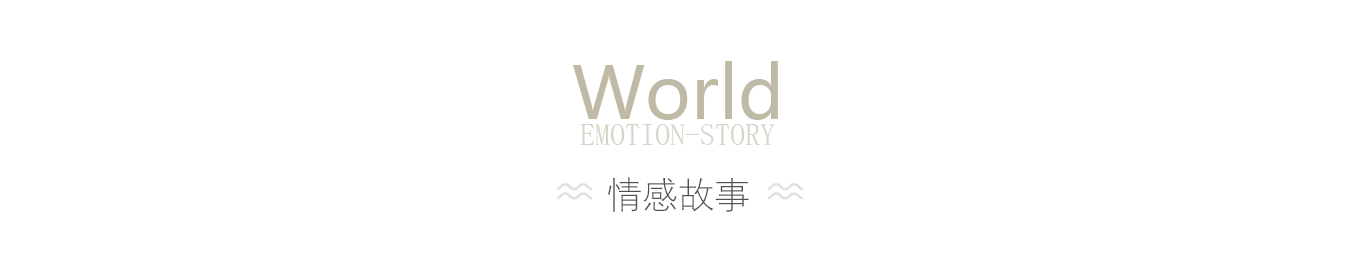
<style>
.page{position:relative;width:1360px;height:280px;background:#ffffff}
.page>*{position:absolute;margin:0}
.t1{font:72px "MicrosoftYaHei";color:#bebaa6}
.t2{font:30px "SimSun";color:#d7d4c8}
.t3{font:36px "DengXian-Light";color:#535050}
</style>
<div class="page">
<p class="t1" style="left:573px;top:61px;width:205px;height:59px">World</p>
<p class="t2" style="left:580px;top:124px;width:195px;height:21px">EMOTION-STORY</p>
<p class="t3" style="left:607px;top:177px;width:142px;height:35px">情感故事</p>
</div>
